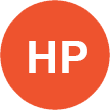
<style>
.page{position:relative;width:110px;height:110px;background:#ee532e}
.page>*{position:absolute;margin:0}
.t1{font:45px "Arial-BoldMT";color:#ffffff}
</style>
<div class="page">
<p class="t1" style="left:29px;top:41px;width:58px;height:32px">HP</p>
</div>
